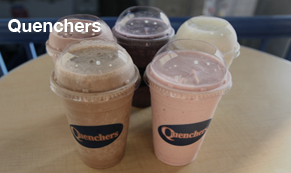
<style>
.page{position:relative;width:291px;height:173px}
.page>*{position:absolute;margin:0}
.t1{font:18px "HelveticaNeue-Bold";color:#ffffff}
</style>
<div class="page">
<p class="t1" style="left:8px;top:19px;width:93px;height:14px">Quenchers</p>
</div>
